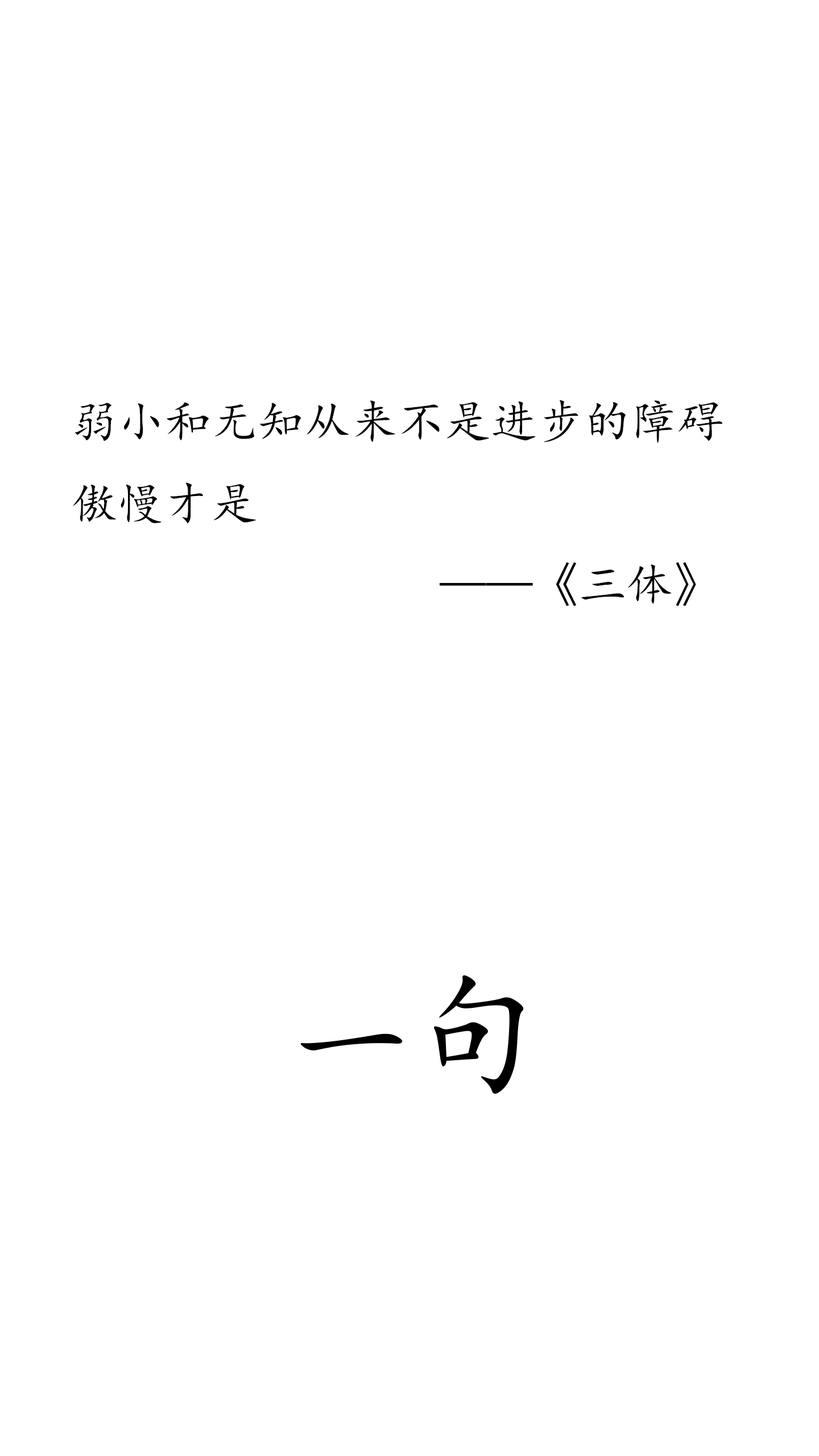
<style>
.page{position:relative;width:819px;height:1456px;background:#ffffff}
.page>*{position:absolute;margin:0}
.t1{font:46.6px "KaiTi";color:#000000}
</style>
<div class="page">
<p class="t1" style="left:73px;top:400px;width:650px;height:206px">弱小和无知从来不是进步的障碍<br>傲慢才是<br>                  ——《三体》</p>
</div>
